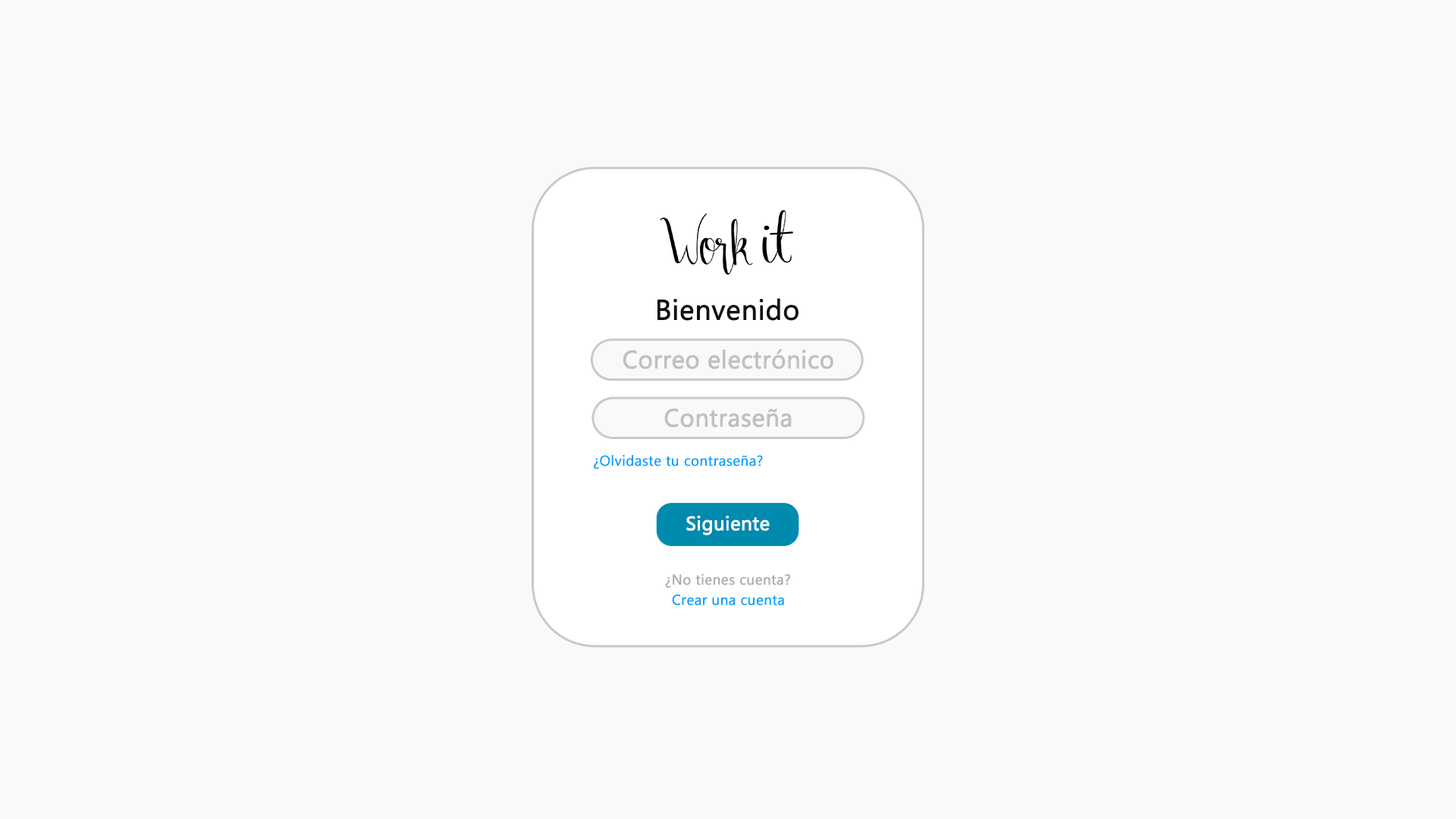
<style>
.page{position:relative;width:1456px;height:819px;background:#f9f9f9}
.page>*{position:absolute;margin:0}
.t1{font:28.1px "Gadugi";color:#111111;font-weight:bold}
.t2{font:24.6px "Gadugi";color:#c0c0c0;font-weight:bold}
.t3{font:14.3px "Gadugi";color:#00a2ff;font-weight:bold}
.t4{font:19.3px "Gadugi";color:#ffffff;font-weight:bold}
.t5{font:14.3px "Gadugi";color:#aaaaaa;font-weight:bold}
</style>
<div class="page">
<p class="t1" style="left:657px;top:298px;width:142px;height:23px">Bienvenido</p>
<p class="t2" style="left:623px;top:349px;width:210px;height:20px">Correo electrónico</p>
<p class="t2" style="left:664px;top:408px;width:128px;height:20px">Contraseña</p>
<p class="t3" style="left:594px;top:455px;width:169px;height:14px">¿Olvidaste tu contraseña?</p>
<p class="t4" style="left:686px;top:516px;width:84px;height:19px">Siguiente</p>
<p class="t5" style="left:665px;top:573px;width:125px;height:15px">¿No tienes cuenta?</p>
<p class="t3" style="left:672px;top:595px;width:112px;height:10px">Crear una cuenta</p>
</div>
